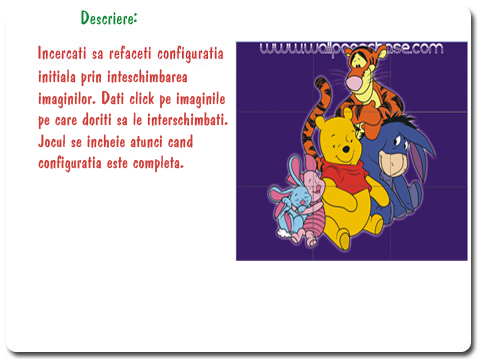
<style>
.page{position:relative;width:478px;height:359px;background:#ffffff}
.page>*{position:absolute;margin:0}
.t1{font:18px "Dominican";color:#ce3b36}
</style>
<div class="page">
<p class="t1" style="left:38px;top:69px;width:190px;height:104px">initiala prin inteschimbarea <br>imaginilor. Dati click pe imaginile <br>pe care doriti sa le interschimbati.<br>Jocul se incheie atunci cand <br>configuratia este completa.</p>
</div>
